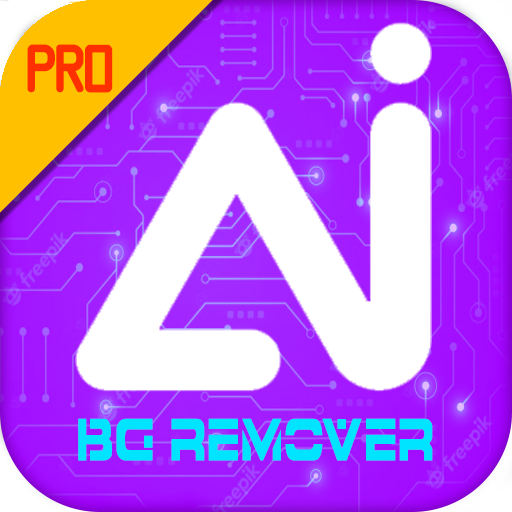
<style>
.page{position:relative;width:512px;height:512px;background:#ffffff}
.page>*{position:absolute;margin:0}
.t1{font:63.4px "11S01BlackTuesday";letter-spacing:-0.02em;color:#ff3000;scale:0.95 1}
.t2{font:50.3px "7thServiceCondensed";letter-spacing:-0.02em;color:#00e4ff}
</style>
<div class="page">
<p class="t1" style="left:27px;top:44px;width:86px;height:49px">PRO</p>
<p class="t2" style="left:78px;top:418px;width:355px;height:43px">BG REMOVER</p>
</div>
